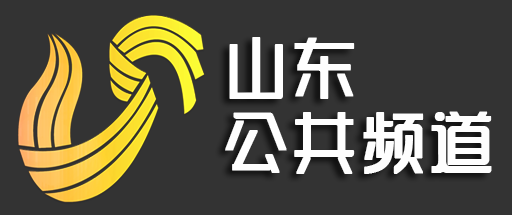
<style>
.page{position:relative;width:512px;height:215px;background:#333333}
.page>*{position:absolute;margin:0}
.t1{font:66.7px/73.3px "SJyunlvyuan";color:#fefefe;font-weight:bold}
</style>
<div class="page">
<p class="t1" style="left:225px;top:37px;width:267px;height:137px">山东<br>公共频道</p>
</div>
